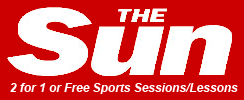
<style>
.page{position:relative;width:244px;height:100px;background:#cc0001}
.page>*{position:absolute;margin:0}
.t1{font:11.9px "Arial-BoldItalicMT";color:#ffffff}
</style>
<div class="page">
<p class="t1" style="left:10px;top:83px;width:228px;height:11px">2 for 1 or Free Sports Sessions/Lessons</p>
</div>
